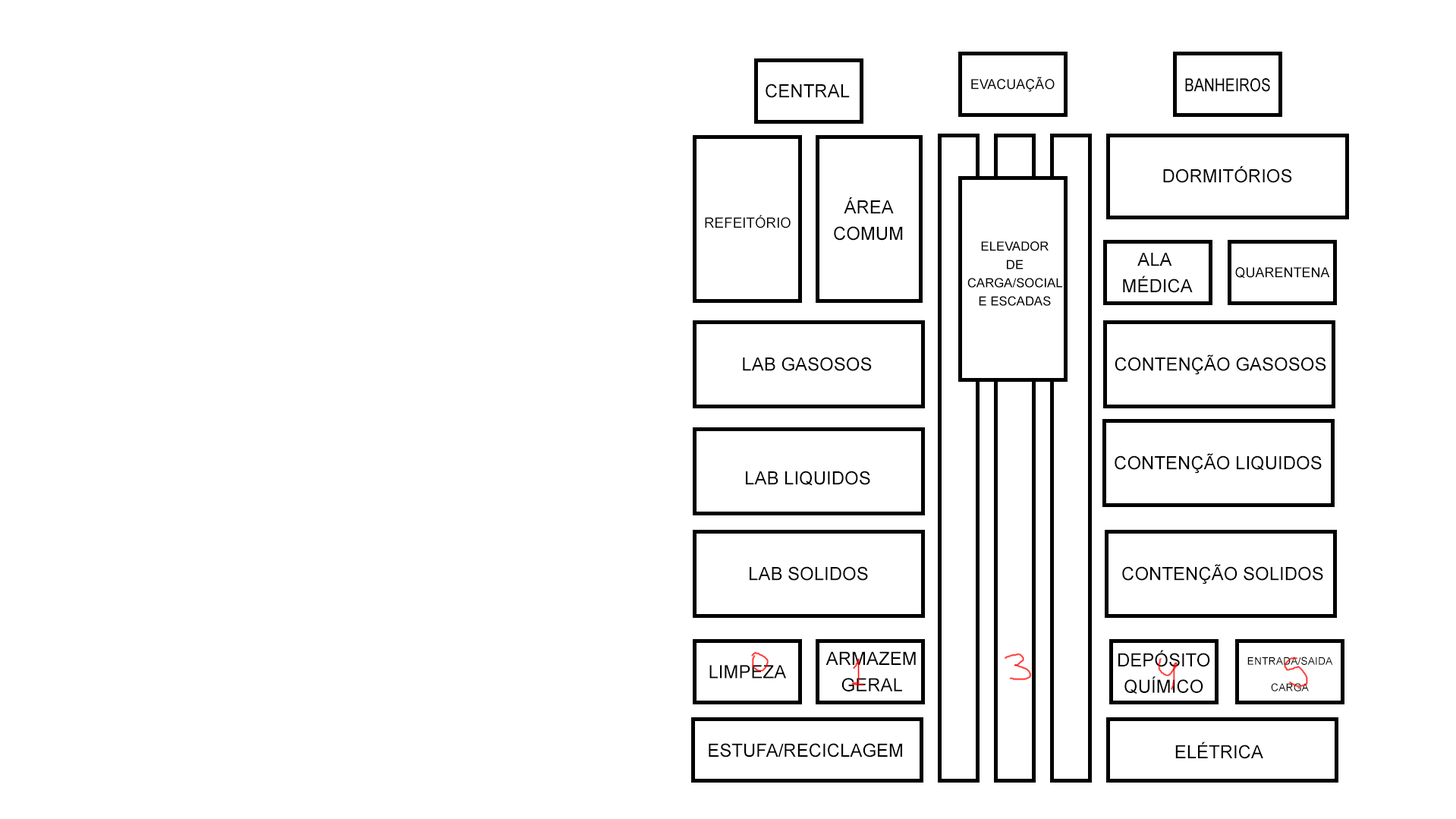
<style>
.page{position:relative;width:1456px;height:819px;background:#ffffff}
.page>*{position:absolute;margin:0}
.t1{font:13.7px "ArialMT";color:#000000}
.t2{font:18.2px "ArialMT";color:#000000}
.t3{font:18px "ArialMT";color:#000000;scale:0.82 1}
.t4{font:18.2px/26.4px "ArialMT";color:#000000}
.t5{font:14.3px "ArialMT";color:#000000}
.t6{font:12.6px/18.3px "ArialMT";color:#000000}
.t7{font:10.6px/26.4px "ArialMT";color:#000000}
</style>
<div class="page">
<p class="t1" style="left:971px;top:77px;width:84px;height:15px">EVACUAÇÃO</p>
<p class="t2" style="left:766px;top:83px;width:84px;height:15px">CENTRAL</p>
<p class="t3" style="left:1185px;top:78px;width:85px;height:14px">BANHEIROS</p>
<p class="t2" style="left:1163px;top:165px;width:129px;height:18px">DORMITÓRIOS</p>
<p class="t4" style="left:834px;top:197px;width:69px;height:44px;text-align:center">ÁREA<br>COMUM</p>
<p class="t5" style="left:705px;top:215px;width:86px;height:13px">REFEITÓRIO</p>
<p class="t6" style="left:968px;top:241px;width:94px;height:65px;text-align:center">ELEVADOR<br>DE<br>CARGA/SOCIAL<br>E ESCADAS</p>
<p class="t4" style="left:1123px;top:253px;width:70px;height:40px;text-align:center">ALA <br>MÉDICA</p>
<p class="t1" style="left:1235px;top:267px;width:95px;height:12px">QUARENTENA</p>
<p class="t2" style="left:743px;top:357px;width:129px;height:14px">LAB GASOSOS</p>
<p class="t2" style="left:1115px;top:354px;width:212px;height:21px">CONTENÇÃO GASOSOS</p>
<p class="t2" style="left:1115px;top:453px;width:207px;height:21px">CONTENÇÃO LIQUIDOS</p>
<p class="t2" style="left:746px;top:471px;width:124px;height:15px">LAB LIQUIDOS</p>
<p class="t2" style="left:750px;top:566px;width:118px;height:15px">LAB SOLIDOS</p>
<p class="t2" style="left:1122px;top:564px;width:201px;height:20px">CONTENÇÃO SOLIDOS</p>
<p class="t4" style="left:826px;top:651px;width:90px;height:40px;text-align:center">ARMAZEM<br>GERAL</p>
<p class="t4" style="left:1119px;top:650px;width:91px;height:44px;text-align:center">DEPÓSITO<br>QUÍMICO</p>
<p class="t2" style="left:710px;top:665px;width:76px;height:13px">LIMPEZA</p>
<p class="t7" style="left:1248px;top:656px;width:85px;height:35px;text-align:center">ENTRADA/SAIDA<br>CARGA</p>
<p class="t2" style="left:709px;top:743px;width:193px;height:14px">ESTUFA/RECICLAGEM</p>
<p class="t2" style="left:1175px;top:741px;width:89px;height:18px">ELÉTRICA</p>
</div>
